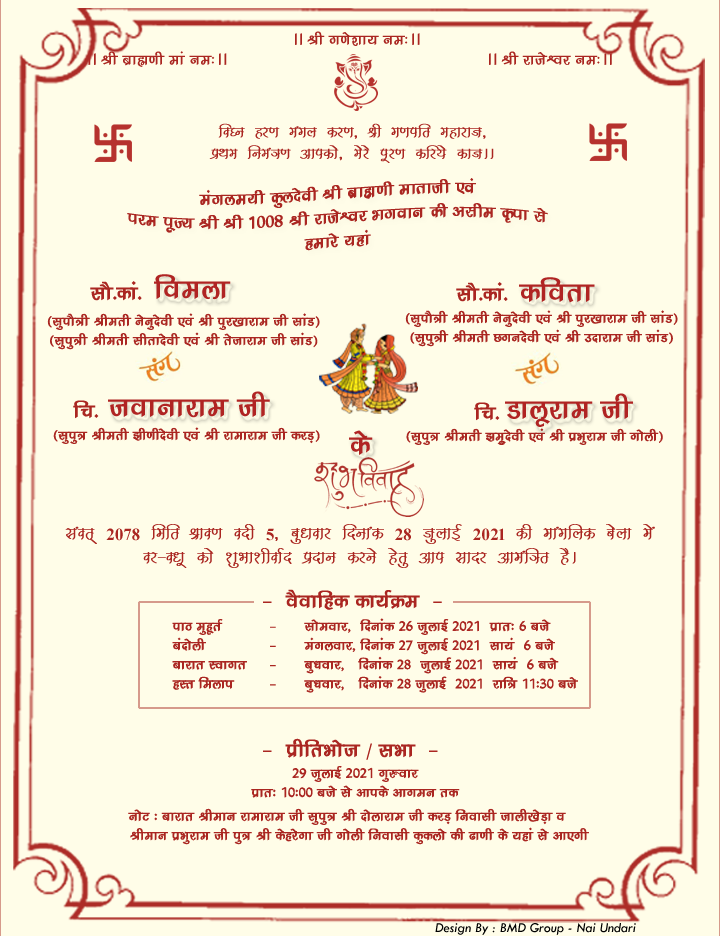
<style>
.page{position:relative;width:720px;height:936px;background:#fffde8}
.page>*{position:absolute;margin:0}
.t1{font:18px "KrutiDev240";color:#aa2621}
.t2{font:18px "KrutiDev250Bold";color:#aa2621}
.t3{font:20px "KrutiDev240";color:#aa2621}
.t4{font:24px "KrutiDev240";color:#aa2621}
.t5{font:34px "KrutiDev240";color:#b02423}
.t6{font:16px "KrutiDev240";color:#aa2621}
.t7{font:20px "KrutiDev250Bold";color:#aa2621}
.t8{font:17px "TimesNewRomanPS-BoldMT";color:#aa2621}
.t9{font:14px "TwCenMT-Italic";color:#000000}
</style>
<div class="page">
<p class="t1" style="left:295px;top:31px;width:125px;height:15px">AA Jh x.ks'kk; ue%AA</p>
<p class="t1" style="left:88px;top:51px;width:524px;height:16px">AA Jh czkã.kh eka ue%AA                                                AA Jh jktsÜoj ue%AA</p>
<p class="t2" style="left:209px;top:123px;width:285px;height:40px;text-align:center">fo?u gj.k eaxy dj.k] Jh x.kifr egkjkt]<br>çFke fuea=.k vkidks] esjs iwj.k dfj;s dktAA</p>
<p class="t3" style="left:127px;top:178px;width:421px;height:73px;text-align:center">eaxye;h dqynsoh Jh czkã.kh ekrkth ,oa <br>ije iwT; Jh Jh 1008 Jh jktsÜoj Hkxoku dh vlhe —ik ls<br>gekjs ;gka</p>
<p class="t4" style="left:90px;top:281px;width:52px;height:20px">lkS-dka-</p>
<p class="t5" style="left:154px;top:274px;width:77px;height:26px">foeyk</p>
<p class="t5" style="left:519px;top:277px;width:76px;height:26px">dfork</p>
<p class="t4" style="left:456px;top:282px;width:52px;height:20px">lkS-dka-</p>
<p class="t6" style="left:47px;top:313px;width:273px;height:37px;text-align:center">¼lqikS=h Jherh usuqnsoh ,oa Jh iqj[kkjke th lkaM½<br> ¼lqiq=h Jherh lhrknsoh ,oa Jh rstkjke th lkaM½</p>
<p class="t6" style="left:405px;top:310px;width:273px;height:37px;text-align:center">¼lqikS=h Jherh usuqnsoh ,oa Jh iqj[kkjke th lkaM½<br> ¼lqiq=h Jherh Nxunsoh ,oa Jh mnkjke th lkaM½</p>
<p class="t4" style="left:73px;top:400px;width:26px;height:19px">fp-</p>
<p class="t5" style="left:108px;top:391px;width:162px;height:27px">tokukjke th</p>
<p class="t5" style="left:505px;top:393px;width:128px;height:34px">Mkywjke th</p>
<p class="t4" style="left:474px;top:402px;width:26px;height:19px">fp-</p>
<p class="t6" style="left:53px;top:427px;width:267px;height:17px">¼lqiq= Jherh &gt;h.khnsoh ,oa Jh jkekjke th djM+½</p>
<p class="t5" style="left:349px;top:430px;width:24px;height:25px">ds</p>
<p class="t6" style="left:406px;top:428px;width:257px;height:17px">¼lqiq= Jherh &gt;eqwnsoh ,oa Jh çHkqjke th xksyh½</p>
<p class="t7" style="left:65px;top:524px;width:590px;height:44px;text-align:center">laor~ <span class="t8">2078</span> fefr Jko.k onh <span class="t8">5</span>] cqèkokj fnukad <span class="t8">28</span> tqykbZ <span class="t8">2021</span> dh ekaxfyd csyk esa<br>oj&amp;oèkw dks 'kqHkk'khokZn çnku djus gsrq vki lknj vkeaf=r gSA</p>
<p class="t4" style="left:263px;top:589px;width:179px;height:21px">&amp;  oSokfgd dk;ZØe  &amp;</p>
<p class="t6" style="left:172px;top:619px;width:75px;height:71px">ikB eqgwrZ<br>canksyh<br>ckjkr Lokxr<br>gLr feyki</p>
<p class="t6" style="left:270px;top:618px;width:308px;height:75px">&amp;      lkseokj]  fnukad 26 tqykbZ 2021  çkr% 6 cts<br>&amp;      eaxyokj] fnukad 27 tqykbZ 2021  lk;a  6 cts <br>&amp;      cq/kokj]   fnukad 28  tqykbZ 2021  lk;a  6 cts <br>&amp;      cq/kokj]   fnukad 28 tqykbZ  2021  jkf= 11%30 cts</p>
<p class="t4" style="left:263px;top:738px;width:175px;height:22px">&amp;  çhfrHkkst <span class="t3">@</span> lHkk  &amp;</p>
<p class="t6" style="left:251px;top:766px;width:209px;height:32px;text-align:center">29 tqykbZ 2021 xq#okj<br>çkr% 10%00 cts ls vkids vkxeu rd</p>
<p class="t6" style="left:128px;top:808px;width:461px;height:37px;text-align:center">uksV % ckjkr Jheku jkekjke th lqiq= Jh nksykjke th djM+ fuoklh tkyh[ksM+k o<br>     Jheku çHkqjke th iq= Jh dsgjsxk th xksyh fuoklh dqdyks dh &lt;k.kh ds ;gka ls vk,xh</p>
<p class="t9" style="left:435px;top:923px;width:201px;height:12px">Design By : BMD Group - Nai Undari</p>
</div>
